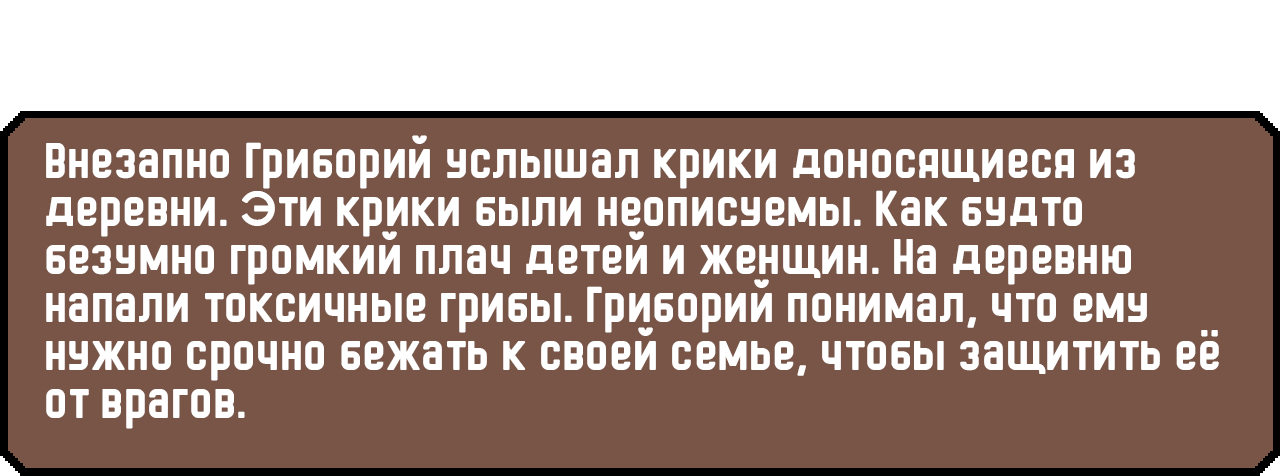
<style>
.page{position:relative;width:1280px;height:476px;background:#795548}
.page>*{position:absolute;margin:0}
.t1{font:48px/48px "HermanoMayor";color:#ffffff}
</style>
<div class="page">
<p class="t1" style="left:46px;top:135px;width:1173px;height:294px">Внезапно Гриборий услышал крики доносящиеся из деревни. Эти крики были неописуемы. Как будто безумно громкий плач детей и женщин. На деревню напали токсичные грибы. Гриборий понимал, что ему нужно срочно бежать к своей семье, чтобы защитить её от врагов.</p>
</div>
